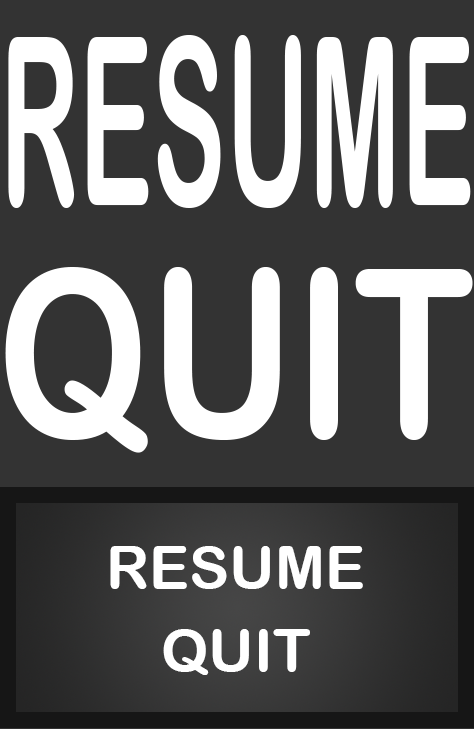
<style>
.page{position:relative;width:474px;height:729px;background:#333333}
.page>*{position:absolute;margin:0}
.t1{font:233.5px "ArialRoundedMTBold";color:#ffffff;scale:0.47 1}
.t2{font:234.4px "ArialRoundedMTBold";color:#ffffff;scale:0.82 1}
.t3{font:60px "ArialRoundedMTBold";color:#ffffff}
</style>
<div class="page">
<p class="t1" style="left:8px;top:35px;width:463px;height:173px">RESUME</p>
<p class="t2" style="left:5px;top:267px;width:468px;height:186px">QUIT</p>
<p class="t3" style="left:110px;top:546px;width:253px;height:43px">RESUME</p>
<p class="t3" style="left:163px;top:629px;width:147px;height:46px">QUIT</p>
</div>
